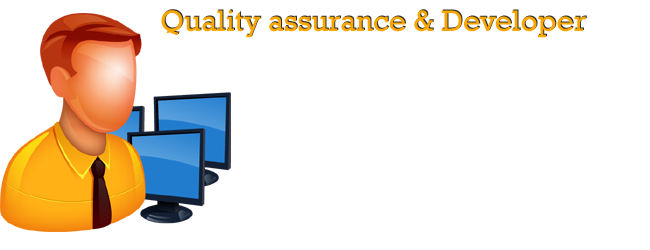
<style>
.page{position:relative;width:650px;height:250px;background:#ffffff}
.page>*{position:absolute;margin:0}
.t1{font:30px "Rockwell";color:#fba700}
.t2{font:30px "Rockwell"}
</style>
<div class="page">
<p class="t1" style="left:161px;top:10px;width:425px;height:28px">Quality assurance &amp; Developer</p>
<p class="t2" style="left:162px;top:9px;width:425px;height:28px">Quality assurance &amp; Developer</p>
</div>
